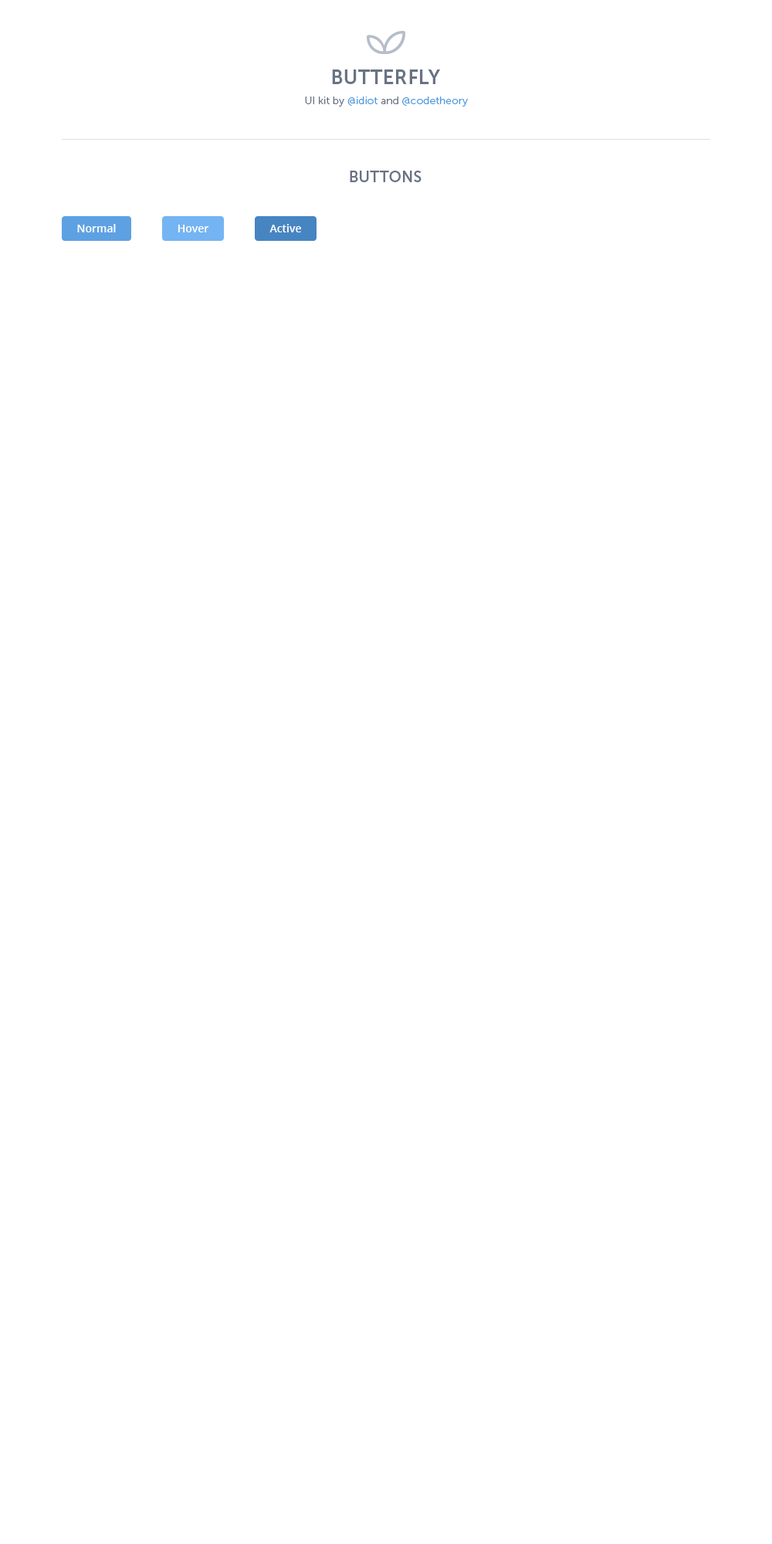
<style>
.page{position:relative;width:772px;height:1544px;background:#ffffff}
.page>*{position:absolute;margin:0}
.t1{font:20.1px "MuseoSans-700";color:#687384}
.t2{font:10.8px "MuseoSans-300";color:#4b99e1}
.t3{font:10.8px "MuseoSans-300";color:#687384}
.t4{font:15.4px "MuseoSans-700";color:#687384}
.t5{font:10.8px "OpenSans-Semibold";color:#ffffff}
</style>
<div class="page">
<p class="t1" style="left:332px;top:69px;width:108px;height:15px">BUTTERFLY</p>
<p class="t2" style="left:305px;top:97px;width:163px;height:10px"><span class="t3">UI kit by </span>@idiot<span class="t3"> and </span>@codetheory</p>
<p class="t4" style="left:350px;top:171px;width:72px;height:11px">BUTTONS</p>
<p class="t5" style="left:77px;top:224px;width:39px;height:8px">Normal</p>
<p class="t5" style="left:178px;top:225px;width:31px;height:7px">Hover</p>
<p class="t5" style="left:269px;top:224px;width:32px;height:8px">Active</p>
</div>
